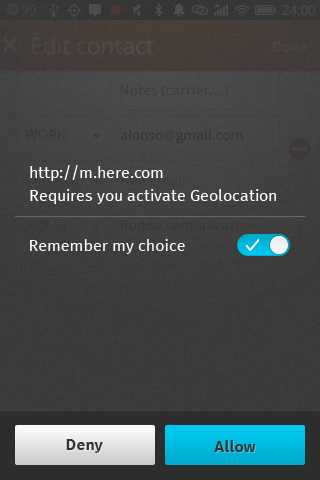
<style>
.page{position:relative;width:320px;height:480px}
.page>*{position:absolute;margin:0}
.t1{font:16px/22.9px "FeuraSans";color:#ffffff}
.t2{font:16px/22.9px "FeuraSans";color:#02c5ed}
.t3{font:16px "FeuraSans";color:#fbfbfb}
.t4{font:16px "FeuraSans-Medium"}
.t5{font:16px "FeuraSans-Medium";color:#333333}
</style>
<div class="page">
<p class="t1" style="left:30px;top:165px;width:246px;height:39px"><span class="t2">http://m.here.com</span> <br>Requires you activate Geolocation</p>
<p class="t3" style="left:30px;top:239px;width:155px;height:15px">Remember my choice</p>
<p class="t4" style="left:214px;top:438px;width:42px;height:12px">Allow</p>
<p class="t5" style="left:66px;top:439px;width:37px;height:14px">Deny</p>
<p class="t5" style="left:66px;top:439px;width:37px;height:14px">Deny</p>
<p class="t5" style="left:214px;top:440px;width:42px;height:12px">Allow</p>
</div>
